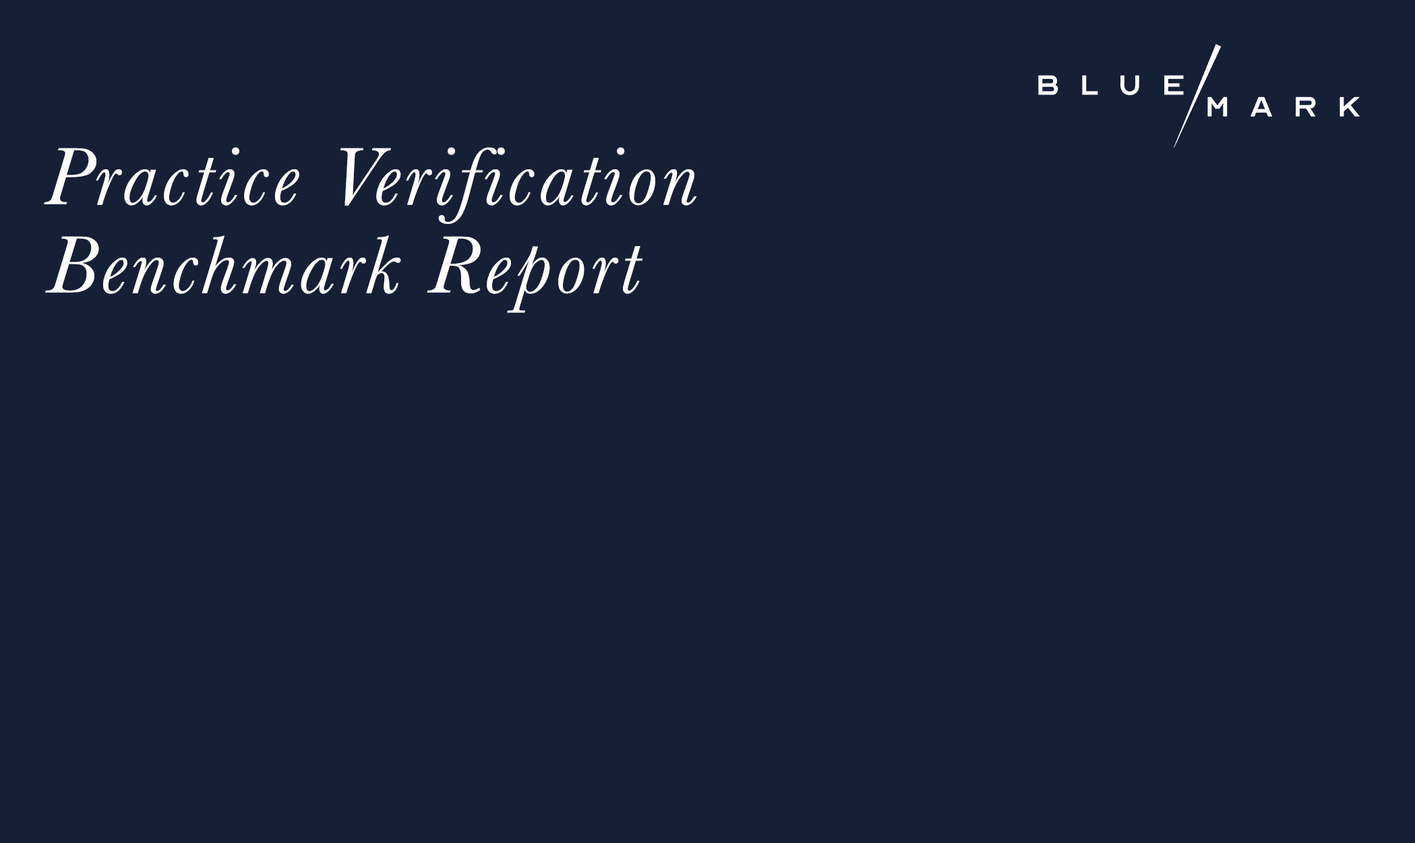
<style>
.page{position:relative;width:1415px;height:843px;background:#152037}
.page>*{position:absolute;margin:0}
.t1{font:84.3px "Baskerville-Italic";letter-spacing:0.05em;color:#ffffff}
</style>
<div class="page">
<p class="t1" style="left:44px;top:147px;width:653px;height:77px">Practice Verification</p>
<p class="t1" style="left:45px;top:235px;width:598px;height:78px">Benchmark Report</p>
</div>
